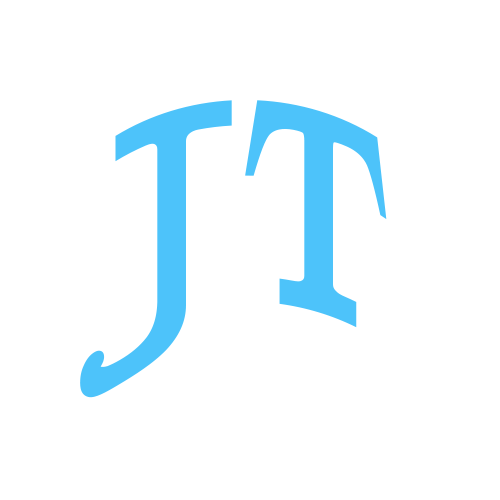
<style>
.page{position:relative;width:500px;height:500px;background:#ffffff}
.page>*{position:absolute;margin:0}
.t1{font:302.2px "NSimSun";color:#4dc3fa;scale:1.09 1}
</style>
<div class="page">
<p class="t1" style="left:80px;top:100px;width:307px;height:298px">JT</p>
</div>
